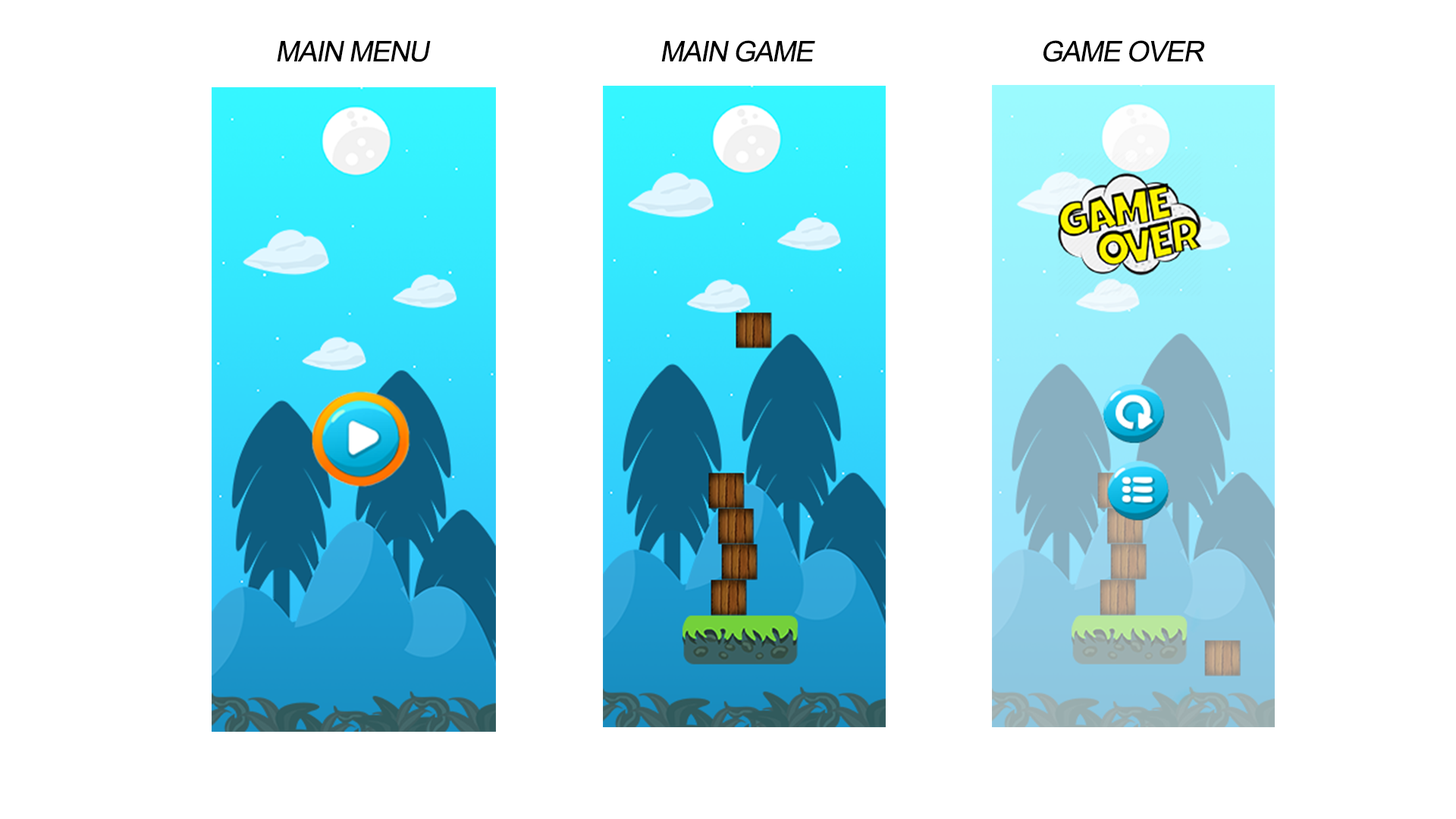
<style>
.page{position:relative;width:1456px;height:819px;background:#ffffff}
.page>*{position:absolute;margin:0}
.t1{font:28.4px "ArialMT";letter-spacing:-0.04em;color:#000000;font-style:italic}
</style>
<div class="page">
<p class="t1" style="left:277px;top:41px;width:154px;height:21px">MAIN MENU</p>
<p class="t1" style="left:661px;top:40px;width:154px;height:22px">MAIN GAME</p>
<p class="t1" style="left:1043px;top:40px;width:162px;height:22px">GAME OVER</p>
</div>
